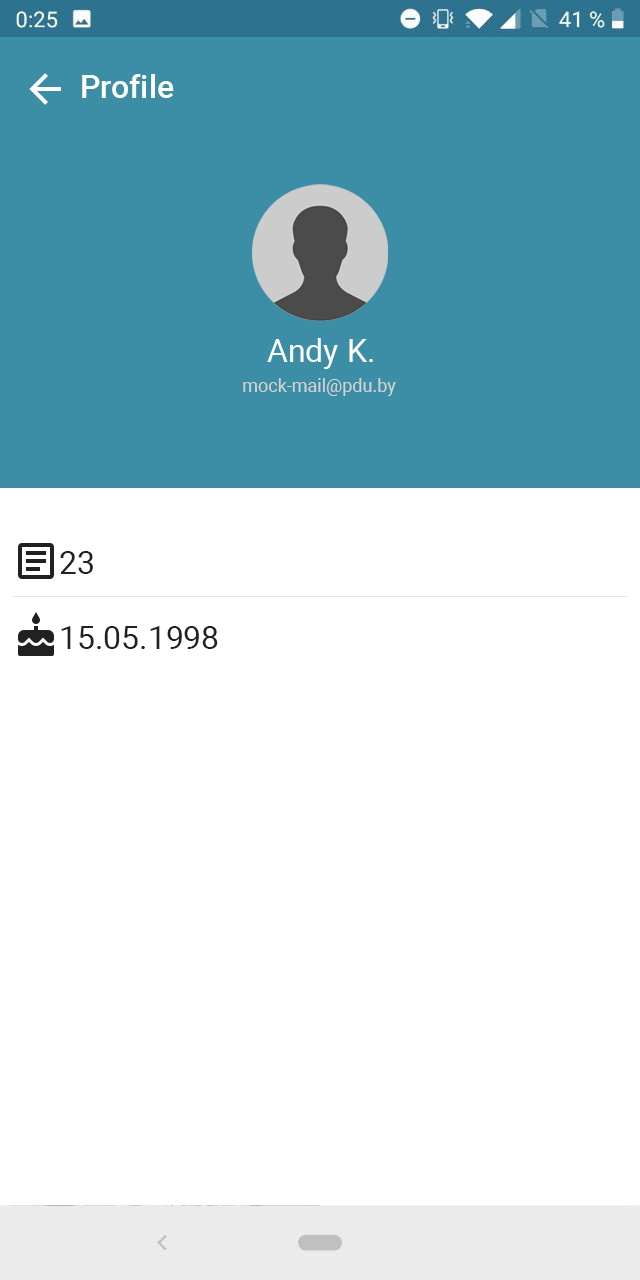
<style>
.page{position:relative;width:640px;height:1280px;background:#ffffff}
.page>*{position:absolute;margin:0}
.t1{font:32px "Roboto-Medium";color:#fffffa}
.t2{font:32px "Roboto-Regular";color:#ffffff}
.t3{font:18px "Roboto-Regular";color:#d4d3d3}
.t4{font:32px "Roboto-Regular";color:#212121}
</style>
<div class="page">
<p class="t1" style="left:82px;top:74px;width:92px;height:24px">Profile</p>
<p class="t2" style="left:267px;top:338px;width:106px;height:31px">Andy K.</p>
<p class="t3" style="left:243px;top:378px;width:153px;height:18px">mock-mail@pdu.by</p>
<p class="t4" style="left:60px;top:551px;width:33px;height:23px">23</p>
<p class="t4" style="left:61px;top:626px;width:157px;height:23px">15.05.1998</p>
</div>
